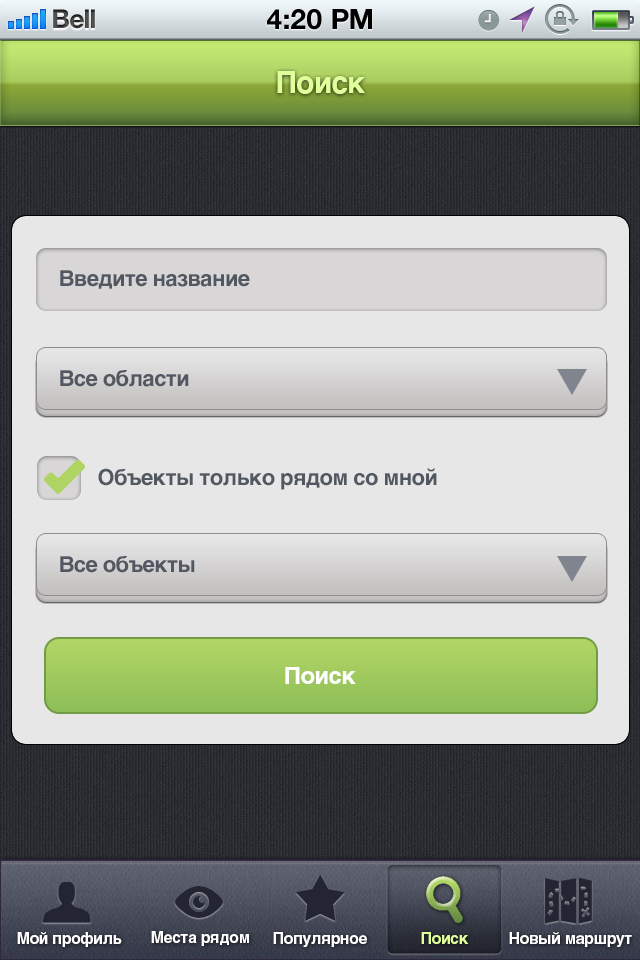
<style>
.page{position:relative;width:640px;height:960px;background:#e7e7e7}
.page>*{position:absolute;margin:0}
.t1{font:30px "Helvetica-Bold";letter-spacing:-0.025em;color:#dfff9b}
.t2{font:22px "Helvetica-Bold";letter-spacing:-0.025em;color:#525862}
.t3{font:24px "Helvetica-Bold";letter-spacing:-0.025em;color:#ffffff}
.t4{font:16px "HelveticaLTStd-Bold";letter-spacing:-0.025em;color:#ffffff}
.t5{font:16px "HelveticaLTStd-Bold";letter-spacing:-0.025em;color:#dfff9b}
</style>
<div class="page">
<p class="t1" style="left:277px;top:71px;width:88px;height:23px">Поиск</p>
<p class="t2" style="left:60px;top:270px;width:190px;height:19px">Введите название</p>
<p class="t2" style="left:60px;top:370px;width:129px;height:17px">Все области</p>
<p class="t2" style="left:98px;top:468px;width:339px;height:22px">Объекты только рядом со мной</p>
<p class="t2" style="left:60px;top:556px;width:135px;height:17px">Все объекты</p>
<p class="t3" style="left:285px;top:667px;width:71px;height:17px">Поиск</p>
<p class="t4" style="left:17px;top:932px;width:105px;height:15px">Мой профиль</p>
<p class="t4" style="left:151px;top:931px;width:98px;height:15px">Места рядом</p>
<p class="t4" style="left:273px;top:932px;width:94px;height:15px">Популярное</p>
<p class="t5" style="left:421px;top:932px;width:48px;height:12px">Поиск</p>
<p class="t4" style="left:509px;top:932px;width:123px;height:15px">Новый маршрут</p>
</div>
